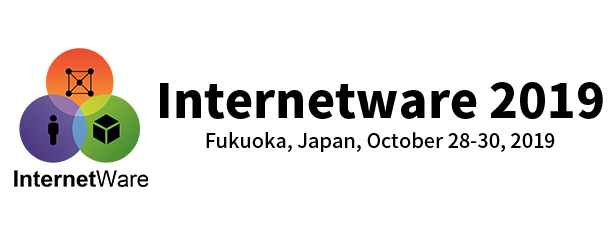
<style>
.page{position:relative;width:615px;height:234px;background:#ffffff}
.page>*{position:absolute;margin:0}
.t1{font:47.6px "SourceHanSans-Heavy";color:#000000}
.t2{font:19.9px "SourceHanSans-Medium";color:#000000}
</style>
<div class="page">
<p class="t1" style="left:160px;top:82px;width:443px;height:37px">Internetware 2019</p>
<p class="t2" style="left:206px;top:132px;width:349px;height:20px">Fukuoka, Japan, October 28-30, 2019</p>
</div>
